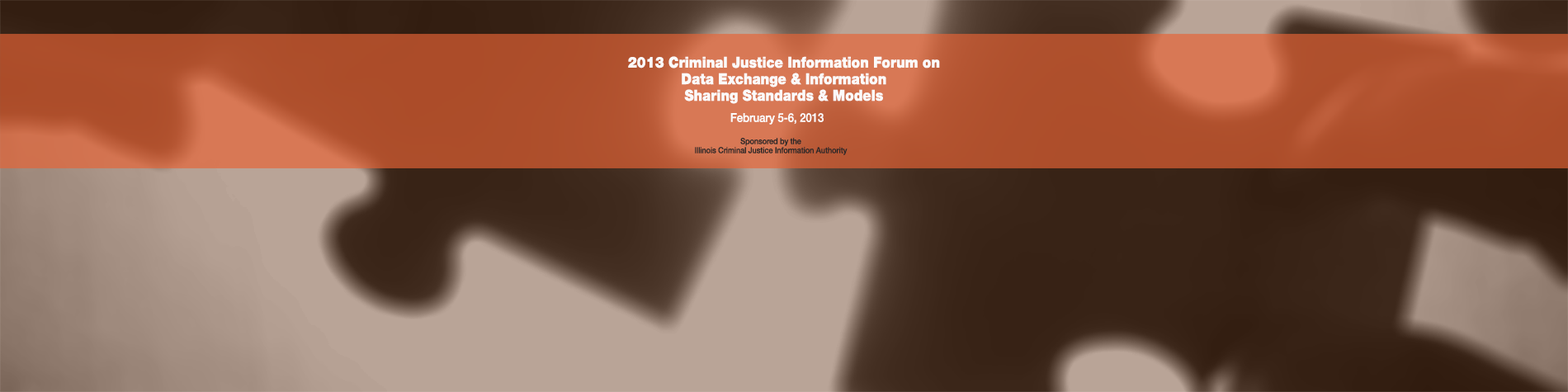
<style>
.page{position:relative;width:1568px;height:392px}
.page>*{position:absolute;margin:0}
.t1{font:15.1px "HelveticaNeueLT-Black";letter-spacing:-0.01em;color:#fbfafa;scale:0.91 1}
.t2{font:12.1px "HelveticaNeueLT-Medium";letter-spacing:-0.01em;color:#fbfafa;scale:0.91 1}
.t3{font:8.3px "HelveticaNeueLT-Medium";letter-spacing:-0.01em;color:#2a2828;scale:0.91 1}
</style>
<div class="page">
<p class="t1" style="left:628px;top:56px;width:312px;height:48px;text-align:center">2013 Criminal Justice Information Forum on<br>Data Exchange &amp; Information<br>Sharing Standards &amp; Models</p>
<p class="t2" style="left:730px;top:113px;width:94px;height:12px">February 5-6, 2013</p>
<p class="t3" style="left:695px;top:138px;width:153px;height:17px;text-align:center">Sponsored by the<br>Illinois Criminal Justice Information Authority</p>
</div>
